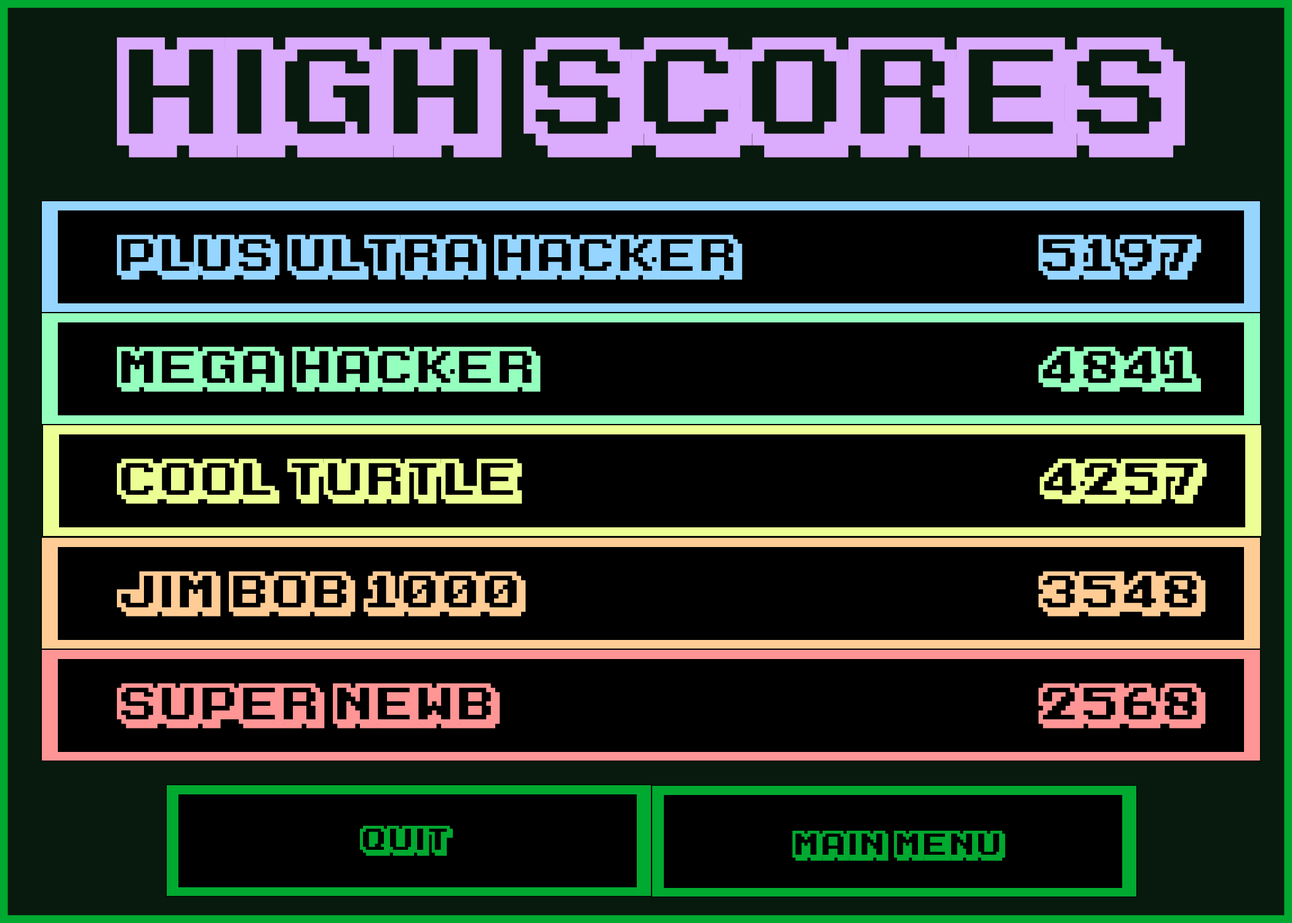
<style>
.page{position:relative;width:1292px;height:923px;background:#000000}
.page>*{position:absolute;margin:0}
.t1{font:123.1px "KarmaticArcade";color:#dbabfd}
.t2{font:46.1px "KarmaticArcade";color:#95d5ff}
.t3{font:46.1px "KarmaticArcade";color:#95ffbe}
.t4{font:46.1px "KarmaticArcade";color:#ecff95}
.t5{font:46.1px "KarmaticArcade";color:#ffcc95}
.t6{font:46.1px "KarmaticArcade";color:#ff9595}
.t7{font:30.8px "KarmaticArcade";color:#00a930}
</style>
<div class="page">
<p class="t1" style="left:117px;top:37px;width:1068px;height:121px">High Scores</p>
<p class="t2" style="left:117px;top:234px;width:626px;height:46px">Plus ultra Hacker</p>
<p class="t2" style="left:1039px;top:234px;width:163px;height:46px">5197</p>
<p class="t3" style="left:117px;top:346px;width:424px;height:46px">Mega hacker</p>
<p class="t3" style="left:1039px;top:346px;width:162px;height:46px">4841</p>
<p class="t4" style="left:117px;top:458px;width:405px;height:46px">Cool Turtle</p>
<p class="t4" style="left:1040px;top:458px;width:167px;height:46px">4257</p>
<p class="t5" style="left:117px;top:571px;width:409px;height:45px">Jim Bob 1000</p>
<p class="t5" style="left:1039px;top:571px;width:167px;height:45px">3548</p>
<p class="t6" style="left:117px;top:683px;width:383px;height:45px">Super Newb</p>
<p class="t6" style="left:1039px;top:683px;width:167px;height:45px">2568</p>
<p class="t7" style="left:360px;top:826px;width:93px;height:30px">QUit</p>
<p class="t7" style="left:792px;top:831px;width:213px;height:30px">Main Menu</p>
</div>
